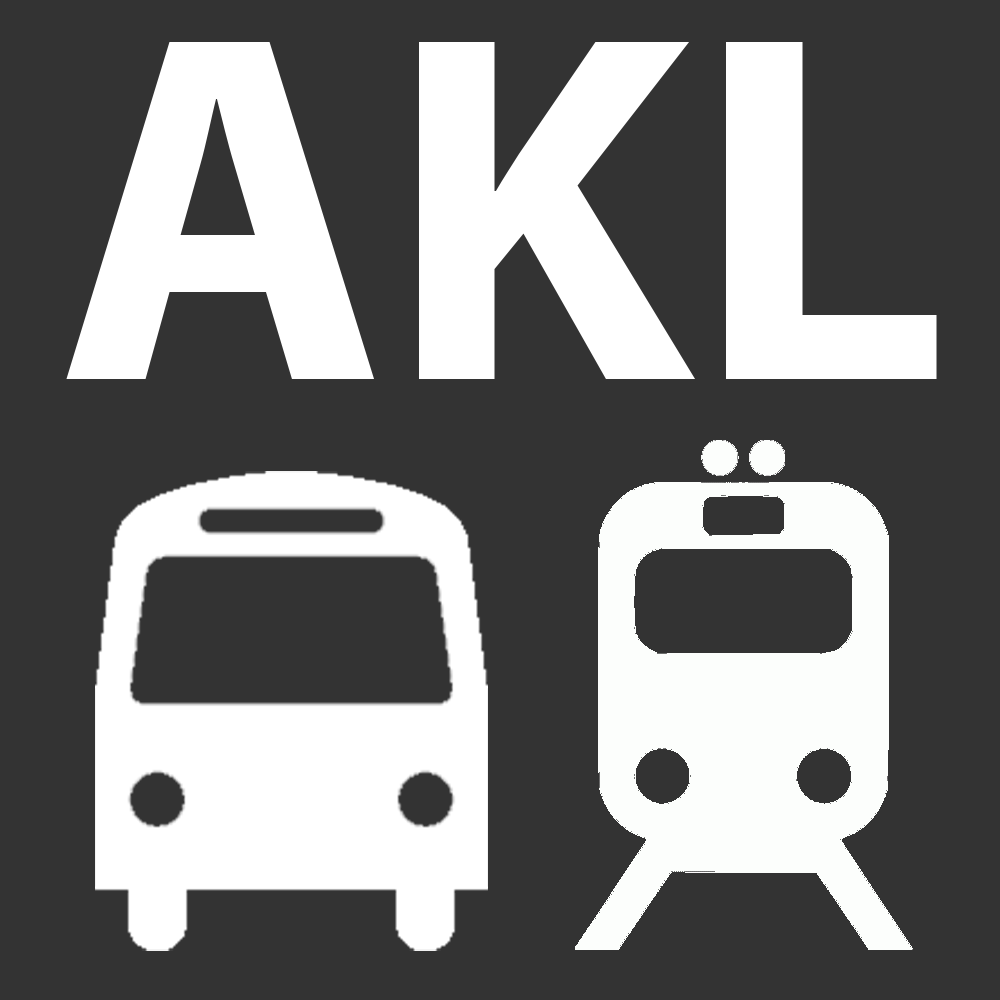
<style>
.page{position:relative;width:1000px;height:1000px;background:#333333}
.page>*{position:absolute;margin:0}
.t1{font:500px "MyriadPro-Bold";color:#ffffff}
</style>
<div class="page">
<p class="t1" style="left:66px;top:42px;width:871px;height:337px">AKL</p>
</div>
